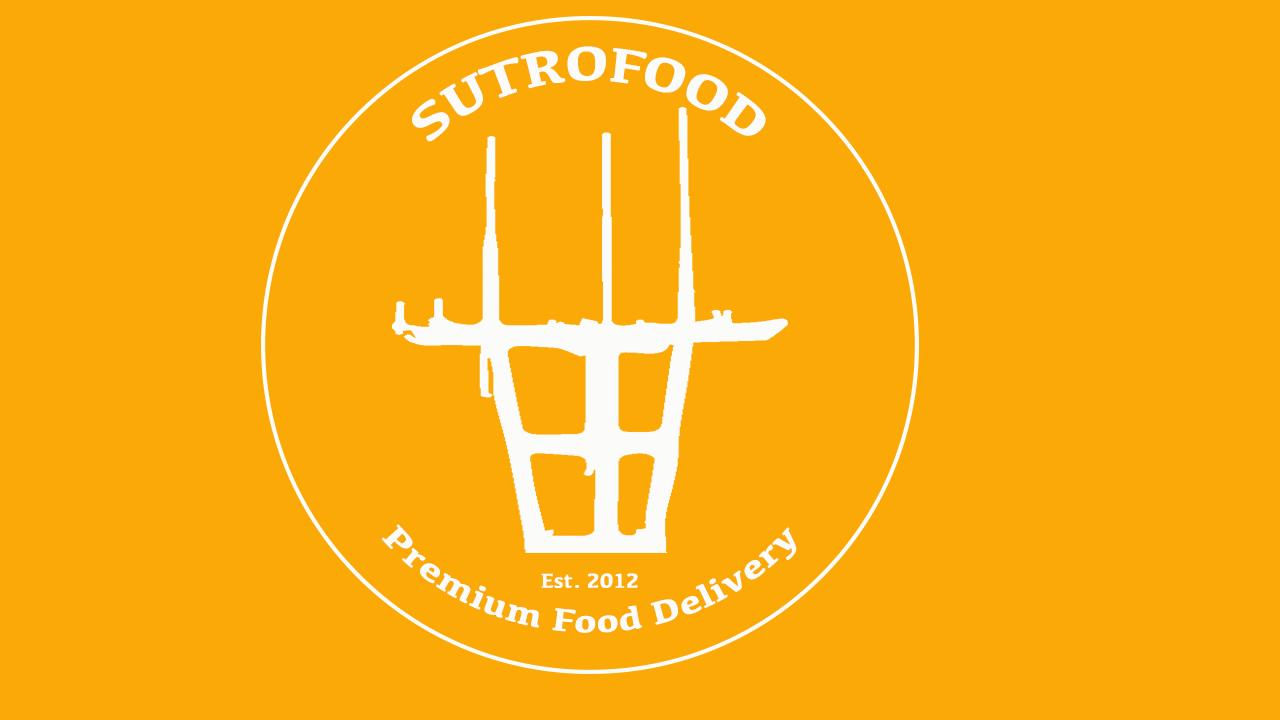
<style>
.page{position:relative;width:1280px;height:720px;background:#faa906}
.page>*{position:absolute;margin:0}
.t1{font:12px "Kefa-Bold";color:#fbfbfa}
.t2{font:33.3px "Kefa-Bold";color:#fbfbfa}
.t3{font:20.8px "Kefa-Bold";color:#fbfbfa}
</style>
<div class="page">
<p class="t1" style="left:412px;top:46px;width:354px;height:96px;text-align:center">SUTROFOOD</p>
<p class="t2" style="left:381px;top:524px;width:416px;height:109px;text-align:center">Premium Food Delivery</p>
<p class="t3" style="left:541px;top:573px;width:97px;height:15px">Est. 2012</p>
</div>
